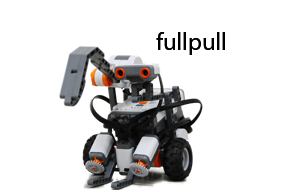
<style>
.page{position:relative;width:283px;height:190px;background:#ffffff}
.page>*{position:absolute;margin:0}
.t1{font:24.4px "MyriadPro-Regular";color:#000000}
</style>
<div class="page">
<p class="t1" style="left:156px;top:32px;width:69px;height:23px">fullpull</p>
</div>
